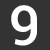
<style>
.page{position:relative;width:50px;height:50px;background:#333333}
.page>*{position:absolute;margin:0}
.t1{font:55px "Roboto-Medium";letter-spacing:0.05em;color:#ffffff}
</style>
<div class="page">
<p class="t1" style="left:11px;top:5px;width:26px;height:41px">9</p>
</div>
